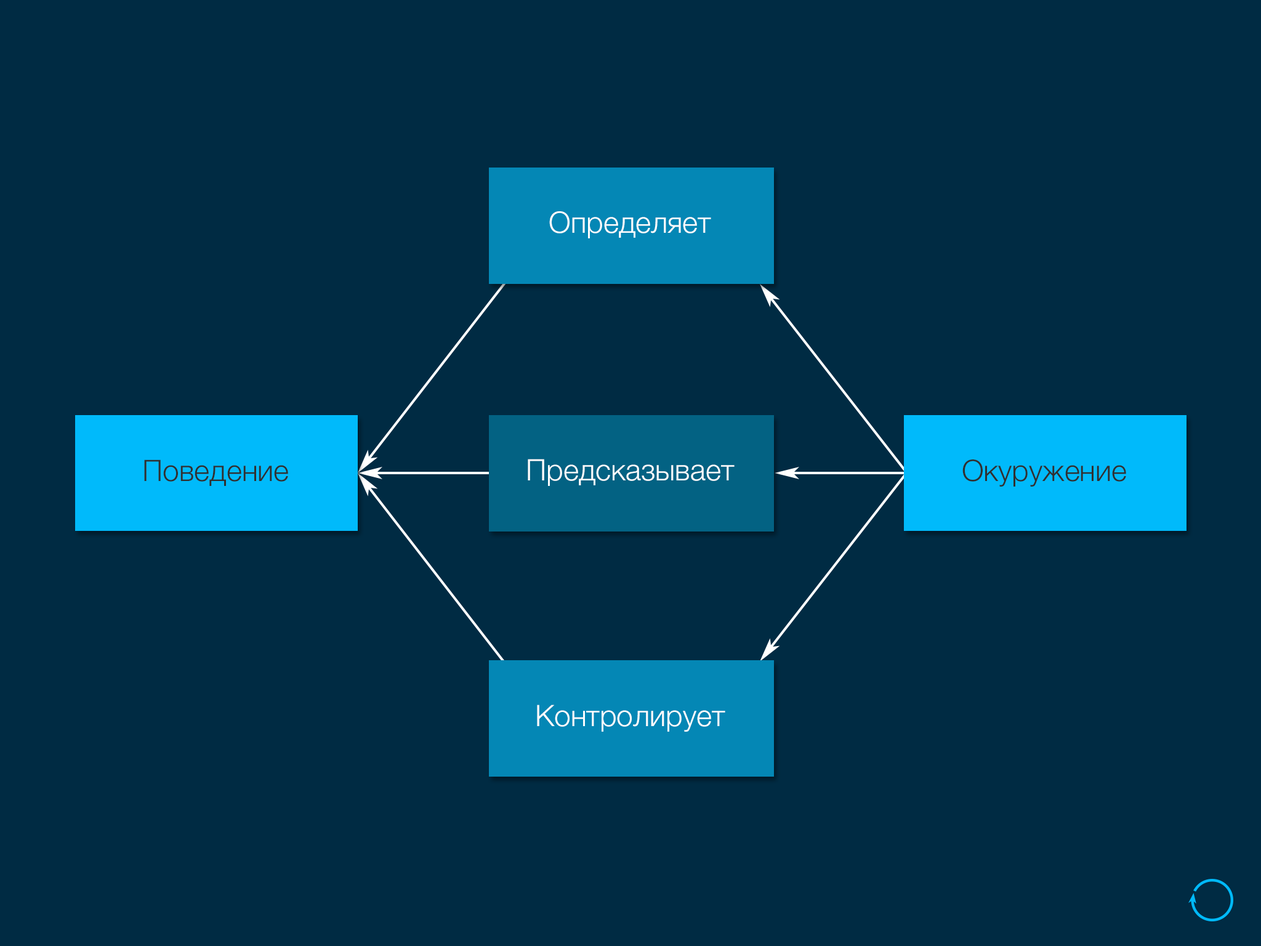
<style>
.page{position:relative;width:1261px;height:946px;background:#002b43}
.page>*{position:absolute;margin:0}
.t1{font:29.6px "HelveticaNeue-Light";color:#ffffff}
.t2{font:29.6px "HelveticaNeue-Light";color:#303030}
</style>
<div class="page">
<p class="t1" style="left:549px;top:211px;width:162px;height:27px">Определяет</p>
<p class="t2" style="left:144px;top:459px;width:144px;height:27px">Поведение</p>
<p class="t1" style="left:528px;top:459px;width:207px;height:27px">Предсказывает</p>
<p class="t2" style="left:962px;top:459px;width:164px;height:27px">Окуружение</p>
<p class="t1" style="left:537px;top:704px;width:188px;height:27px">Контролирует</p>
</div>
